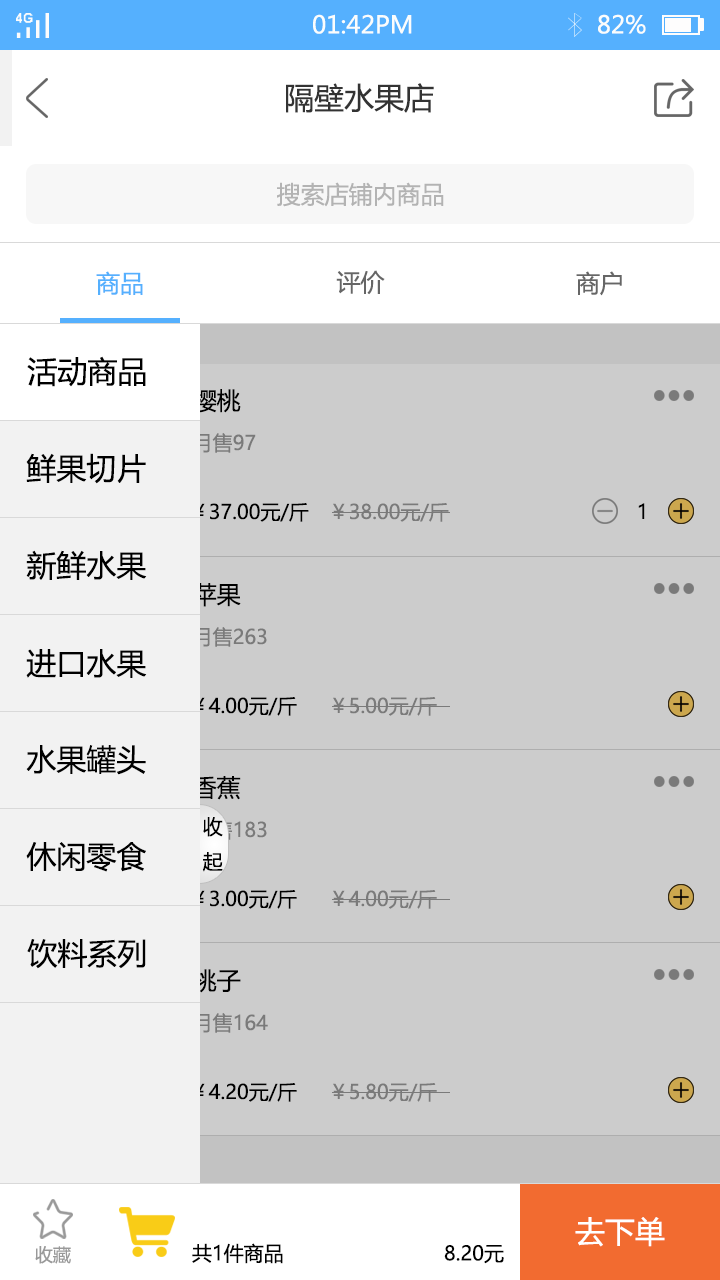
<style>
.page{position:relative;width:720px;height:1280px;background:#cccccc}
.page>*{position:absolute;margin:0}
.t1{font:24px "MicrosoftYaHei";color:#fbfdfc}
.t2{font:30px "MicrosoftYaHei";color:#333333}
.t3{font:24px "MicrosoftYaHei";color:#b3b3b3}
.t4{font:24px "MicrosoftYaHei";color:#666666}
.t5{font:24px "MicrosoftYaHei";color:#55b0fe}
.t6{font:30px "MicrosoftYaHei";color:#000000}
.t7{font:24px "MicrosoftYaHei";color:#000000}
.t8{font:20px "MicrosoftYaHei";color:#7a7a7a}
.t9{font:20px "MicrosoftYaHei";color:#000000}
.t10{font:30px "MicrosoftYaHei";color:#ffffff}
.t11{font:17.9px "MicrosoftYaHei";color:#999999}
</style>
<div class="page">
<p class="t1" style="left:313px;top:14px;width:99px;height:20px">01:42PM</p>
<p class="t1" style="left:598px;top:14px;width:48px;height:20px">82%</p>
<p class="t2" style="left:286px;top:83px;width:148px;height:30px">隔壁水果店</p>
<p class="t3" style="left:277px;top:182px;width:167px;height:25px">搜索店铺内商品</p>
<p class="t4" style="left:336px;top:270px;width:49px;height:25px">评价</p>
<p class="t5" style="left:96px;top:271px;width:47px;height:24px">商品</p>
<p class="t4" style="left:576px;top:271px;width:46px;height:25px">商户</p>
<p class="t6" style="left:27px;top:356px;width:119px;height:31px">活动商品</p>
<p class="t7" style="left:192px;top:389px;width:49px;height:24px">樱桃</p>
<p class="t8" style="left:193px;top:433px;width:63px;height:20px">月售97</p>
<p class="t6" style="left:26px;top:453px;width:120px;height:31px">鲜果切片</p>
<p class="t9" style="left:193px;top:503px;width:116px;height:19px">￥37.00元/斤</p>
<p class="t8" style="left:333px;top:503px;width:116px;height:19px">￥38.00元/斤</p>
<p class="t9" style="left:638px;top:503px;width:7px;height:16px">1</p>
<p class="t6" style="left:26px;top:550px;width:121px;height:30px">新鲜水果</p>
<p class="t7" style="left:193px;top:583px;width:48px;height:24px">苹果</p>
<p class="t8" style="left:193px;top:627px;width:74px;height:20px">月售263</p>
<p class="t6" style="left:26px;top:649px;width:121px;height:29px">进口水果</p>
<p class="t9" style="left:193px;top:697px;width:104px;height:19px">￥4.00元/斤</p>
<p class="t8" style="left:333px;top:697px;width:104px;height:19px">￥5.00元/斤</p>
<p class="t6" style="left:26px;top:745px;width:120px;height:30px">水果罐头</p>
<p class="t7" style="left:193px;top:776px;width:48px;height:24px">香蕉</p>
<p class="t9" style="left:203px;top:817px;width:20px;height:55px">收<br>起</p>
<p class="t6" style="left:26px;top:842px;width:120px;height:30px">休闲零食</p>
<p class="t9" style="left:193px;top:890px;width:104px;height:19px">￥3.00元/斤</p>
<p class="t8" style="left:333px;top:890px;width:104px;height:19px">￥4.00元/斤</p>
<p class="t6" style="left:27px;top:939px;width:119px;height:30px">饮料系列</p>
<p class="t7" style="left:192px;top:969px;width:49px;height:24px">桃子</p>
<p class="t8" style="left:193px;top:1013px;width:75px;height:20px">月售164</p>
<p class="t9" style="left:193px;top:1083px;width:104px;height:19px">￥4.20元/斤</p>
<p class="t8" style="left:333px;top:1083px;width:104px;height:19px">￥5.80元/斤</p>
<p class="t10" style="left:575px;top:1217px;width:90px;height:30px">去下单</p>
<p class="t11" style="left:35px;top:1246px;width:36px;height:18px">收藏</p>
<p class="t9" style="left:192px;top:1243px;width:91px;height:21px">共1件商品</p>
<p class="t9" style="left:444px;top:1245px;width:60px;height:19px">8.20元</p>
</div>
